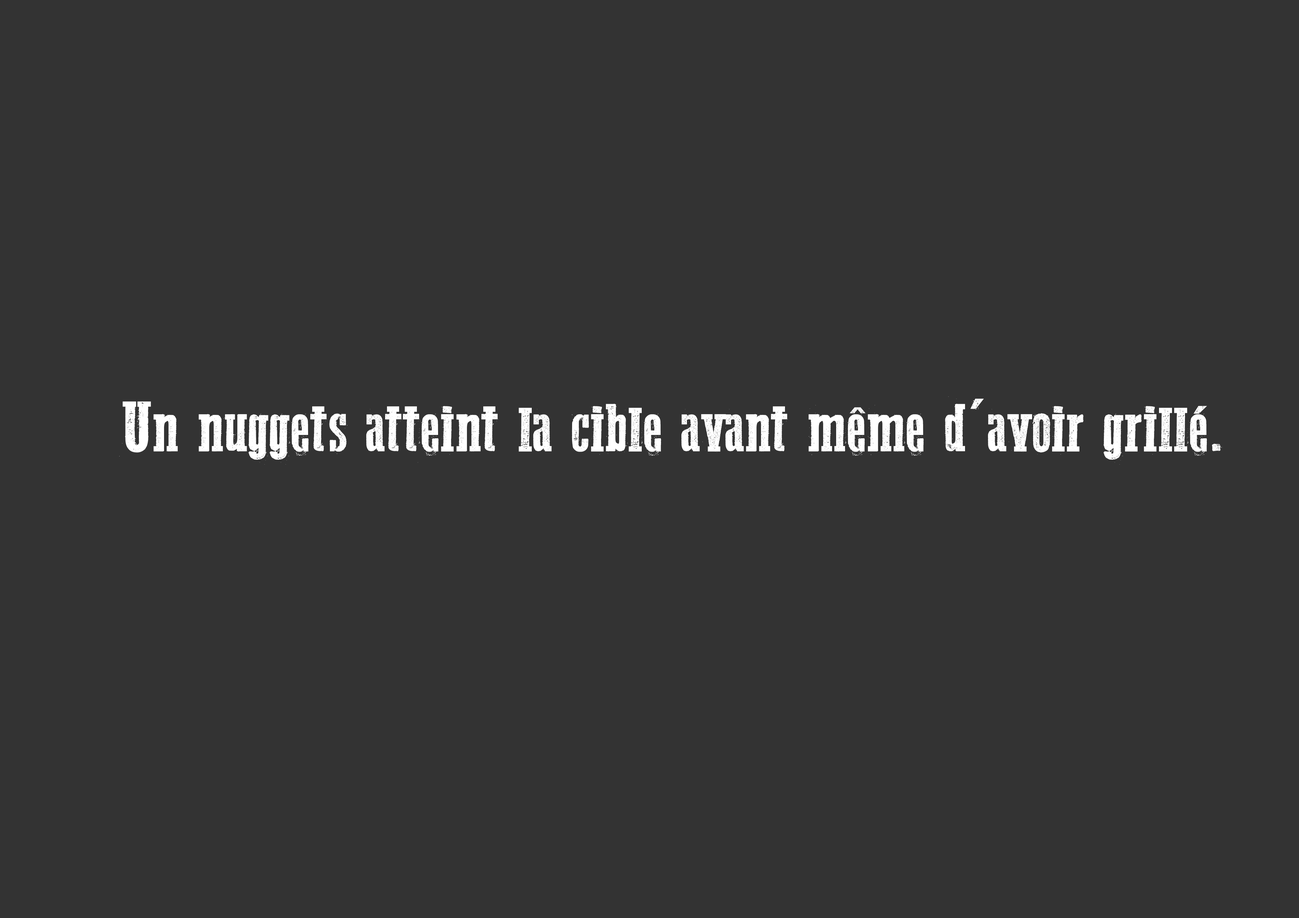
<style>
.page{position:relative;width:1299px;height:918px;background:#333333}
.page>*{position:absolute;margin:0}
.t1{font:74px "WesternBangBang";color:#ffffff}
</style>
<div class="page">
<p class="t1" style="left:119px;top:396px;width:1103px;height:69px">Un nuggets atteint la cible avant même d'avoir grillé.</p>
</div>
